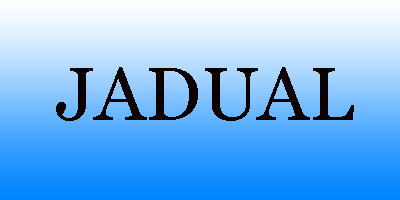
<style>
.page{position:relative;width:400px;height:200px}
.page>*{position:absolute;margin:0}
.t1{font:75px "Vani";color:#0a0000}
</style>
<div class="page">
<p class="t1" style="left:56px;top:67px;width:298px;height:54px">JADUAL</p>
</div>
